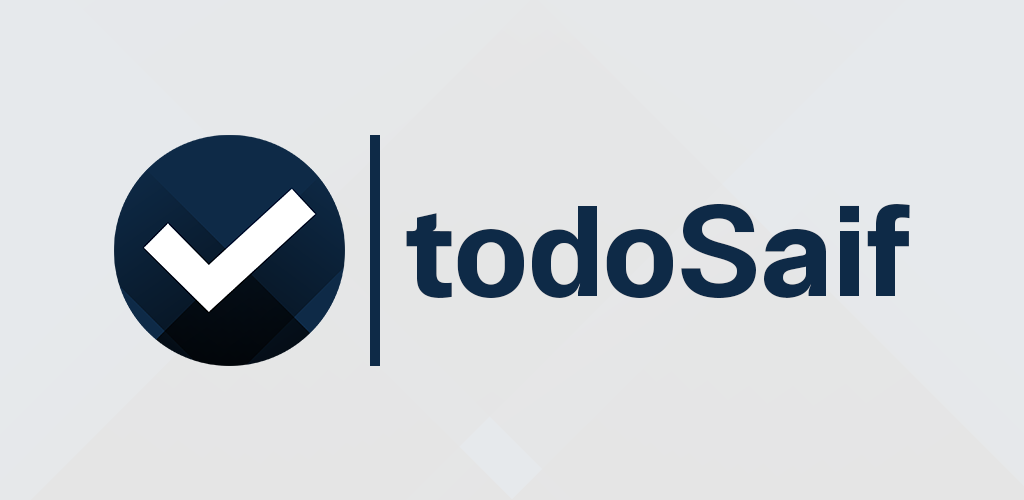
<style>
.page{position:relative;width:1024px;height:500px;background:#e6e9ec}
.page>*{position:absolute;margin:0}
.t1{font:129.2px "Halenoir-Bold";color:#0e2a47}
</style>
<div class="page">
<p class="t1" style="left:406px;top:203px;width:504px;height:95px">todoSaif</p>
</div>
